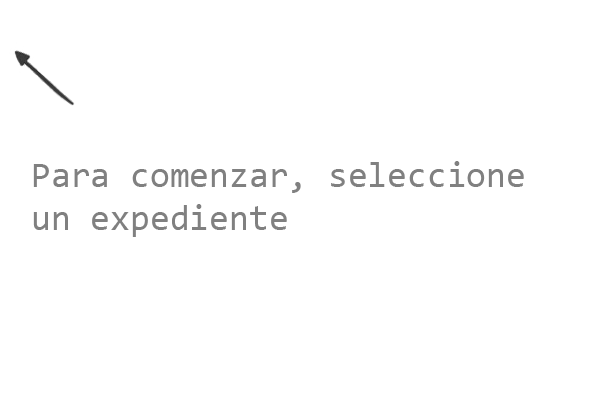
<style>
.page{position:relative;width:600px;height:400px;background:#ffffff}
.page>*{position:absolute;margin:0}
.t1{font:36px "Consolas";color:#808080}
</style>
<div class="page">
<p class="t1" style="left:33px;top:161px;width:491px;height:76px">Para comenzar, seleccione un expediente</p>
</div>
